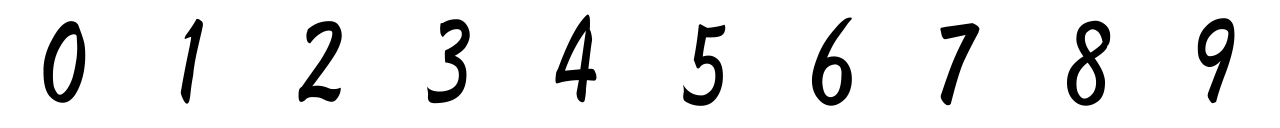
<style>
.page{position:relative;width:1280px;height:128px;background:#ffffff}
.page>*{position:absolute;margin:0}
.t1{font:120px "HGSGyoshotai";color:#000000}
</style>
<div class="page">
<p class="t1" style="left:555px;top:14px;width:42px;height:89px">4</p>
<p class="t1" style="left:811px;top:17px;width:41px;height:89px">6</p>
<p class="t1" style="left:43px;top:21px;width:43px;height:82px">0</p>
<p class="t1" style="left:180px;top:18px;width:23px;height:86px">1</p>
<p class="t1" style="left:298px;top:21px;width:44px;height:81px">2</p>
<p class="t1" style="left:427px;top:19px;width:43px;height:85px">3</p>
<p class="t1" style="left:683px;top:24px;width:43px;height:82px">5</p>
<p class="t1" style="left:940px;top:23px;width:40px;height:83px">7</p>
<p class="t1" style="left:1067px;top:20px;width:44px;height:86px">8</p>
<p class="t1" style="left:1197px;top:18px;width:38px;height:86px">9</p>
</div>
